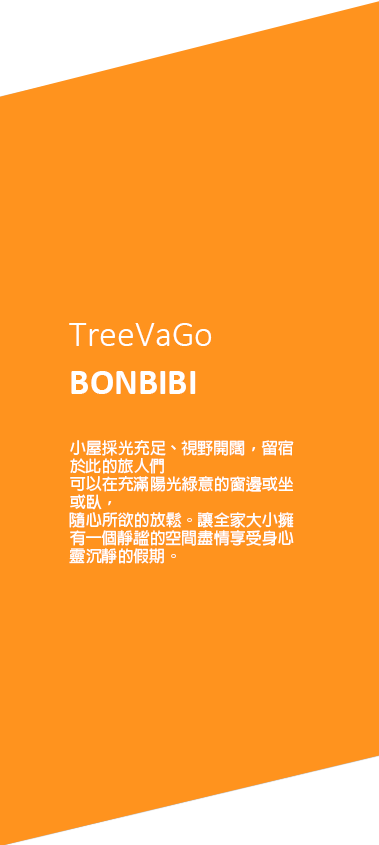
<style>
.page{position:relative;width:379px;height:845px;background:#ff931e}
.page>*{position:absolute;margin:0}
.t1{font:36px/48px "Calibri-Light";color:#ffffff}
.t2{font:36px/48px "Calibri-Bold";color:#ffffff}
.t3{font:16px/18px "AdobeFanHeitiStd-Bold";color:#ffffff}
</style>
<div class="page">
<p class="t1" style="left:69px;top:323px;width:143px;height:71px">TreeVaGo<br><span class="t2">BONBIBI</span></p>
<p class="t3" style="left:69px;top:440px;width:225px;height:124px">小屋採光充足、視野開闊，留宿於此的旅人們 <br>可以在充滿陽光綠意的窗邊或坐或臥， <br>隨心所欲的放鬆。讓全家大小擁有一個靜謐的空間盡情享受身心靈沉靜的假期。</p>
</div>
